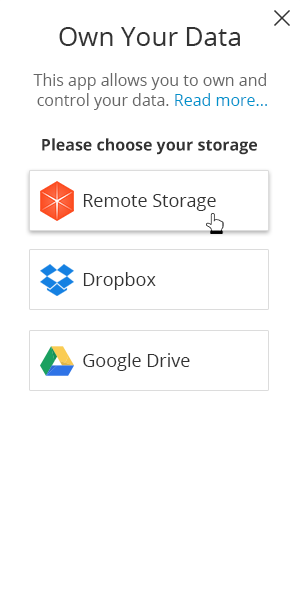
<style>
.page{position:relative;width:300px;height:600px;background:#ffffff}
.page>*{position:absolute;margin:0}
.t1{font:26px "OpenSans";color:#333333}
.t2{font:16px/20px "OpenSans";color:#666666}
.t3{font:16px/20px "OpenSans";color:#0093cc}
.t4{font:16px "OpenSans-Bold";color:#333333}
.t5{font:18px "OpenSans";color:#333333}
</style>
<div class="page">
<p class="t1" style="left:59px;top:27px;width:181px;height:19px">Own Your Data</p>
<p class="t2" style="left:33px;top:73px;width:234px;height:37px;text-align:center">This app allows you to own and <br>control your data. <span class="t3">Read more...</span></p>
<p class="t4" style="left:42px;top:138px;width:215px;height:17px">Please choose your storage</p>
<p class="t5" style="left:83px;top:194px;width:133px;height:17px">Remote Storage</p>
<p class="t5" style="left:83px;top:272px;width:73px;height:18px">Dropbox</p>
<p class="t5" style="left:83px;top:353px;width:107px;height:18px">Google Drive</p>
</div>
